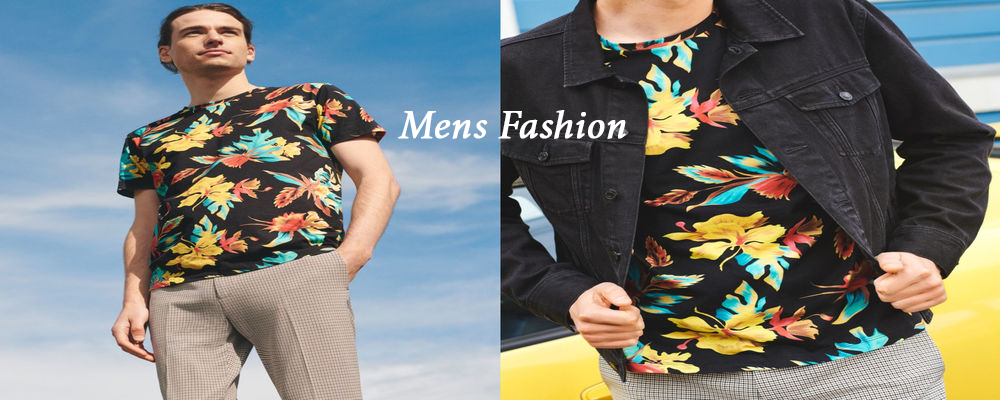
<style>
.page{position:relative;width:1000px;height:400px}
.page>*{position:absolute;margin:0}
.t1{font:40px "MinionPro-It";color:#ffffff;font-weight:bold}
</style>
<div class="page">
<p class="t1" style="left:398px;top:110px;width:228px;height:29px">Mens Fashion</p>
</div>
